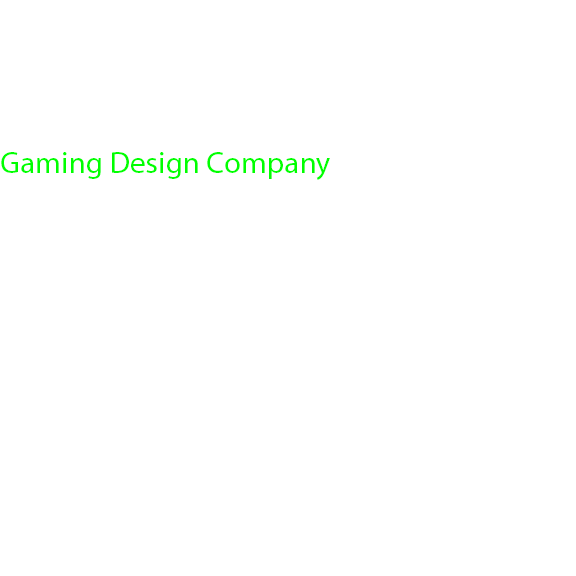
<style>
.page{position:relative;width:576px;height:576px;background:#ffffff}
.page>*{position:absolute;margin:0}
.t1{font:31px "MyriadPro-Regular";color:#00ff00}
</style>
<div class="page">
<p class="t1" style="left:1px;top:152px;width:329px;height:28px">Gaming Design Company</p>
</div>
